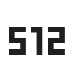
<style>
.page{position:relative;width:74px;height:74px;background:#ffffff}
.page>*{position:absolute;margin:0}
.t1{font:45px "04b24";color:#1f1f1f}
</style>
<div class="page">
<p class="t1" style="left:9px;top:27px;width:56px;height:28px">512</p>
</div>
